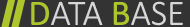
<style>
.page{position:relative;width:190px;height:27px;background:#333333}
.page>*{position:absolute;margin:0}
.t1{font:36px "Calibri-Light";color:#d7d7d7}
.t2{font:36px "Calibri";color:#aec62c}
</style>
<div class="page">
<p class="t1" style="left:31px;top:1px;width:152px;height:25px"><span class="t2">D</span>ATA <span class="t2">B</span>ASE</p>
</div>
